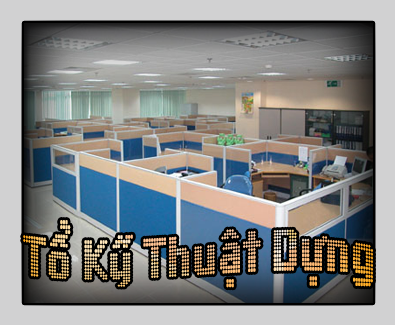
<style>
.page{position:relative;width:395px;height:325px;background:#d1d1d2}
.page>*{position:absolute;margin:0}
.t1{font:60px "HP-Yard-Regular";scale:0.69 1}
</style>
<div class="page">
<p class="t1" style="left:23px;top:220px;width:350px;height:68px">Toå Kyõ Thuaät Döïng</p>
</div>
